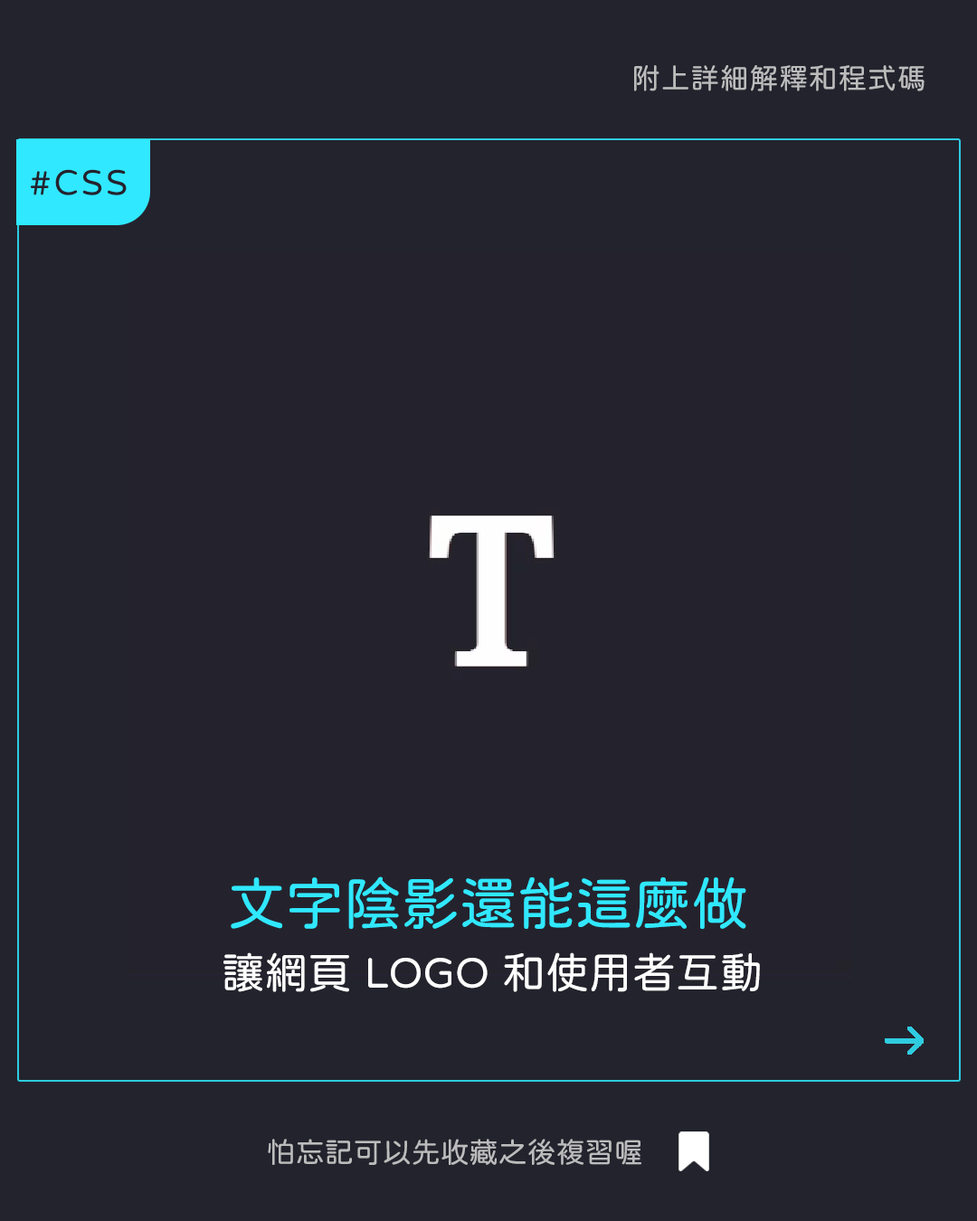
<style>
.page{position:relative;width:977px;height:1221px;background:#23232d}
.page>*{position:absolute;margin:0}
.t1{font:28.9px "jf-openhuninn-1.1";letter-spacing:0.02em;color:#bcbcbd}
.t2{font:36.2px "jf-openhuninn-1.1";letter-spacing:0.08em;color:#24232d}
.t3{font:57.9px "jf-openhuninn-1.1";color:#30e8ff}
.t4{font:43.4px "jf-openhuninn-1.1";color:#fefefe}
.t5{font:28.9px "jf-openhuninn-1.1";color:#bcbcbd}
</style>
<div class="page">
<p class="t1" style="left:634px;top:65px;width:290px;height:26px">附上詳細解釋和程式碼</p>
<p class="t2" style="left:30px;top:169px;width:97px;height:26px">#CSS</p>
<p class="t3" style="left:231px;top:876px;width:515px;height:54px">文字陰影還能這麼做</p>
<p class="t4" style="left:223px;top:952px;width:537px;height:40px">讓網頁 LOGO 和使用者互動</p>
<p class="t5" style="left:268px;top:1139px;width:373px;height:26px">怕忘記可以先收藏之後複習喔</p>
</div>
